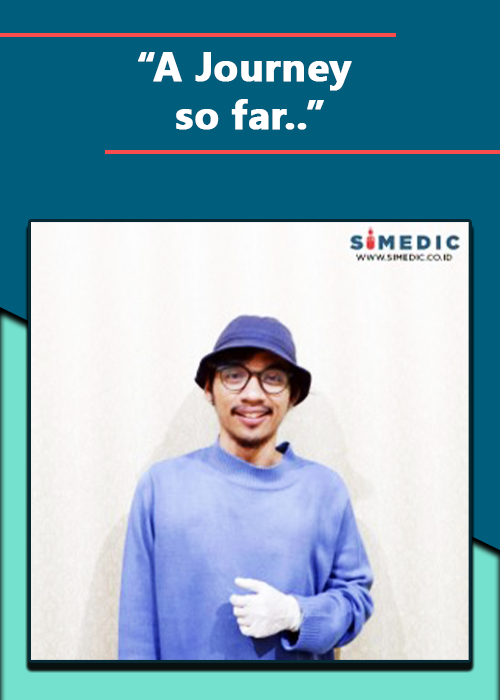
<style>
.page{position:relative;width:500px;height:700px;background:#005e7c}
.page>*{position:absolute;margin:0}
.t1{font:40px "SegoeUI-Bold";color:#ffffff;font-weight:bold}
</style>
<div class="page">
<p class="t1" style="left:138px;top:52px;width:214px;height:78px;text-align:center">“A Journey <br>so far..”</p>
</div>
